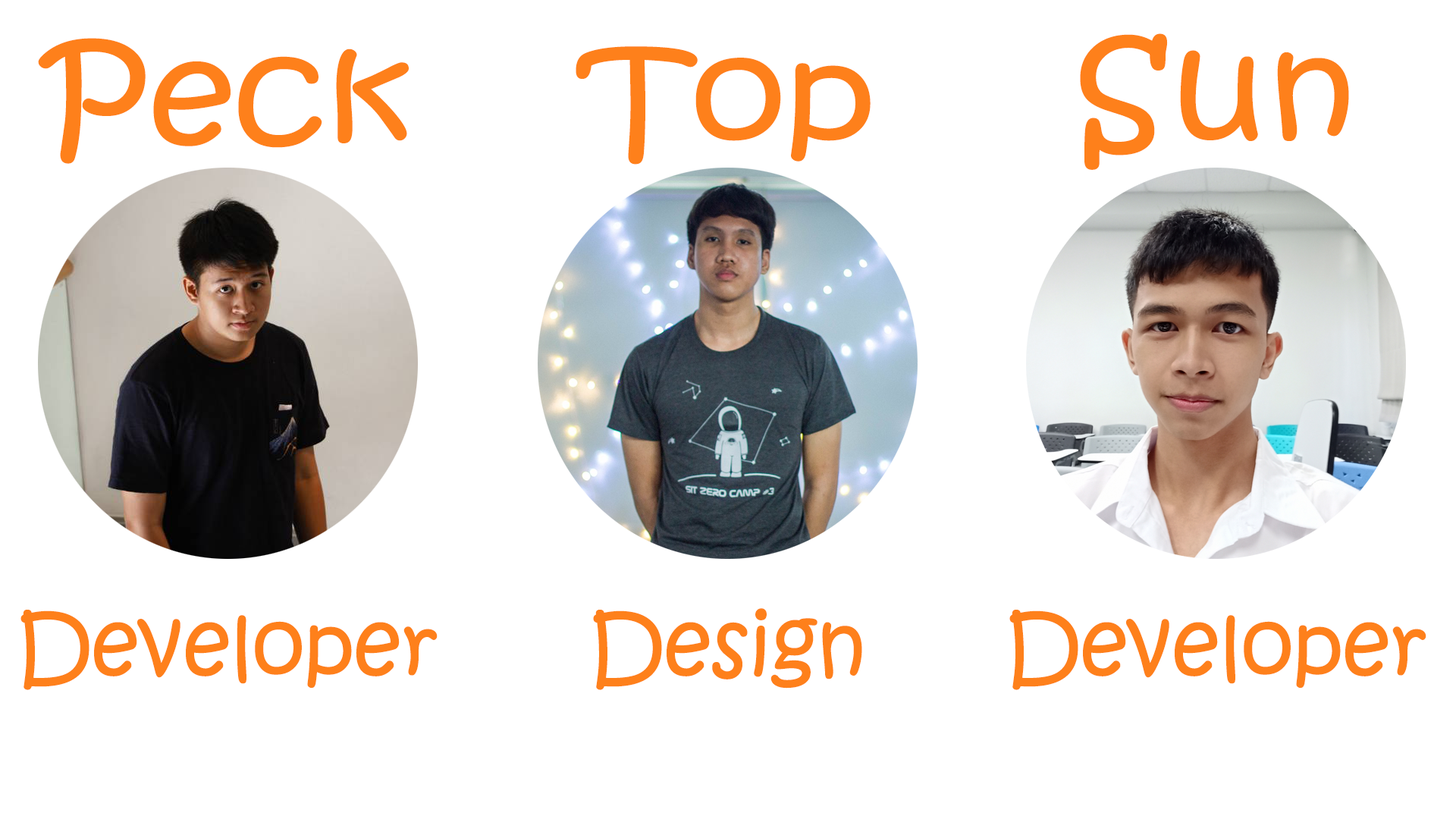
<style>
.page{position:relative;width:1456px;height:819px;background:#ffffff}
.page>*{position:absolute;margin:0}
.t1{font:135.5px "KristenITC-Regular";color:#fe801b;scale:1.12 1}
.t2{font:86.4px "KristenITC-Regular";color:#fe801b}
</style>
<div class="page">
<p class="t1" style="left:38px;top:38px;width:371px;height:126px">Peck</p>
<p class="t1" style="left:1080px;top:33px;width:269px;height:137px">Sun</p>
<p class="t1" style="left:576px;top:46px;width:295px;height:119px">Top</p>
<p class="t2" style="left:20px;top:610px;width:418px;height:80px">Developer</p>
<p class="t2" style="left:593px;top:608px;width:269px;height:82px">Design</p>
<p class="t2" style="left:1009px;top:610px;width:417px;height:80px">Developer</p>
</div>
